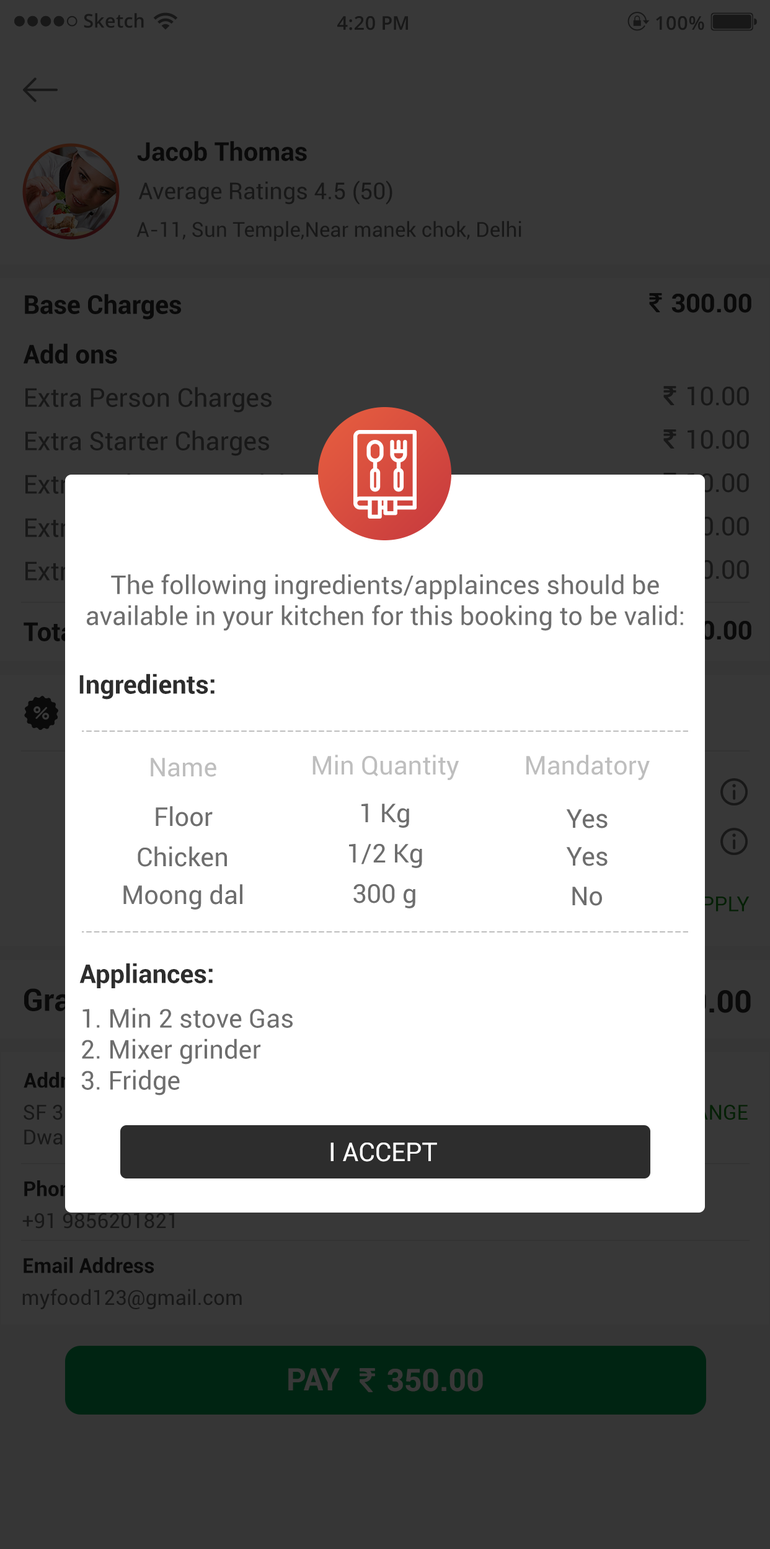
<style>
.page{position:relative;width:770px;height:1549px;background:#383838}
.page>*{position:absolute;margin:0}
.t1{font:18.9px "OpenSans-Semibold";color:#000000}
.t2{font:25.8px "Roboto-Bold";color:#0a0a0a}
.t3{font:23.2px "Roboto-Regular";color:#181818}
.t4{font:20.7px "Roboto-Regular";color:#181818}
.t5{font:25.8px "Roboto-Regular";color:#181818}
.t6{font:25.8px "Roboto-Regular";color:#6e6e6e}
.t7{font:25.8px "Roboto-Bold";color:#2d2d2d}
.t8{font:25.8px "Roboto-Regular";color:#bebebe}
.t9{font:25.8px "Roboto-Regular";color:#ffffff}
.t10{font:20.7px "Roboto-Bold";color:#0a0a0a}
.t11{font:31px "Roboto-Bold";color:#383838}
</style>
<div class="page">
<p class="t1" style="left:84px;top:13px;width:60px;height:15px">Sketch</p>
<p class="t1" style="left:337px;top:16px;width:71px;height:14px">4:20 PM</p>
<p class="t1" style="left:656px;top:16px;width:48px;height:14px">100%</p>
<p class="t2" style="left:137px;top:141px;width:170px;height:20px">Jacob Thomas</p>
<p class="t3" style="left:138px;top:180px;width:254px;height:25px">Average Ratings 4.5 (50)</p>
<p class="t4" style="left:136px;top:221px;width:385px;height:20px">A-11, Sun Temple,Near manek chok, Delhi</p>
<p class="t2" style="left:25px;top:294px;width:156px;height:26px">Base Charges</p>
<p class="t2" style="left:671px;top:294px;width:80px;height:19px">300.00</p>
<p class="t2" style="left:24px;top:343px;width:93px;height:21px">Add ons</p>
<p class="t5" style="left:25px;top:387px;width:246px;height:26px">Extra Person Charges</p>
<p class="t5" style="left:687px;top:387px;width:62px;height:19px">10.00</p>
<p class="t5" style="left:25px;top:430px;width:244px;height:26px">Extra Starter Charges</p>
<p class="t5" style="left:687px;top:430px;width:62px;height:19px">10.00</p>
<p class="t6" style="left:87px;top:574px;width:596px;height:57px;text-align:center">The following ingredients/applainces should be<br>available in your kitchen for this booking to be valid:</p>
<p class="t7" style="left:79px;top:674px;width:135px;height:26px">Ingredients:</p>
<p class="t8" style="left:151px;top:758px;width:65px;height:19px">Name</p>
<p class="t8" style="left:312px;top:755px;width:147px;height:25px">Min Quantity</p>
<p class="t8" style="left:526px;top:755px;width:123px;height:25px">Mandatory</p>
<p class="t6" style="left:156px;top:806px;width:57px;height:21px">Floor</p>
<p class="t6" style="left:361px;top:804px;width:48px;height:24px">1 Kg</p>
<p class="t6" style="left:566px;top:809px;width:41px;height:20px">Yes</p>
<p class="t6" style="left:349px;top:844px;width:73px;height:24px">1/2 Kg</p>
<p class="t6" style="left:138px;top:847px;width:89px;height:20px">Chicken</p>
<p class="t6" style="left:566px;top:847px;width:41px;height:19px">Yes</p>
<p class="t6" style="left:123px;top:884px;width:119px;height:26px">Moong dal</p>
<p class="t6" style="left:353px;top:884px;width:62px;height:24px">300 g</p>
<p class="t6" style="left:572px;top:887px;width:30px;height:19px">No</p>
<p class="t7" style="left:79px;top:963px;width:134px;height:25px">Appliances:</p>
<p class="t6" style="left:82px;top:1008px;width:211px;height:88px">1. Min 2 stove Gas<br>2. Mixer grinder<br>3. Fridge</p>
<p class="t9" style="left:330px;top:1143px;width:107px;height:19px">I ACCEPT</p>
<p class="t4" style="left:22px;top:1213px;width:152px;height:16px">+91 9856201821</p>
<p class="t10" style="left:24px;top:1257px;width:130px;height:16px">Email Address</p>
<p class="t4" style="left:22px;top:1289px;width:220px;height:20px">myfood123@gmail.com</p>
<p class="t11" style="left:288px;top:1368px;width:52px;height:23px">PAY</p>
<p class="t11" style="left:387px;top:1369px;width:96px;height:23px">350.00</p>
</div>
